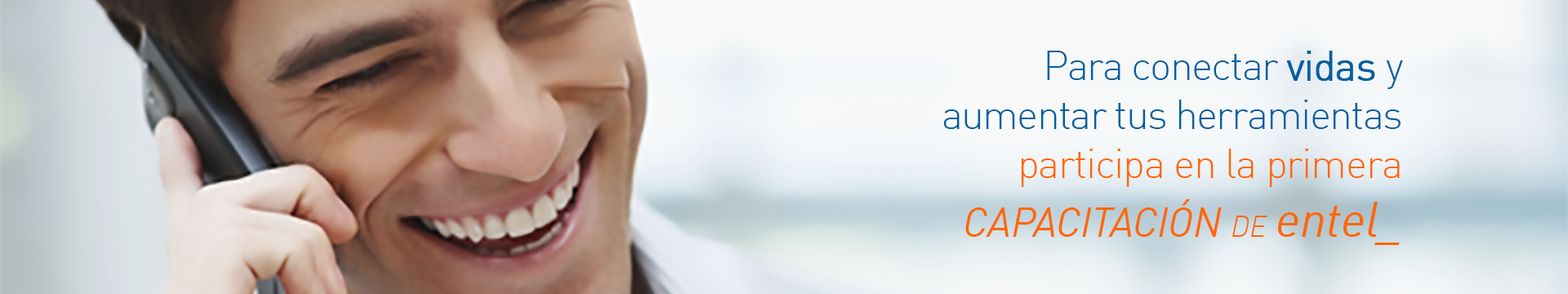
<style>
.page{position:relative;width:1568px;height:294px}
.page>*{position:absolute;margin:0}
.t1{font:40.8px "DIN-Light";letter-spacing:-0.035em;color:#005f9f}
.t2{font:40.8px "DIN-Light";letter-spacing:-0.035em;color:#005f9f;font-weight:bold}
.t3{font:40.8px "DIN-Light";letter-spacing:-0.026em;color:#ff6702}
.t4{font:40.8px "DIN-RegularItalic";letter-spacing:-0.007em;color:#ff6702}
.t5{font:29.4px "DIN-LightItalic";letter-spacing:-0.007em;color:#ff6702}
.t6{font:49px "DIN-RegularItalic";letter-spacing:-0.007em;color:#ff6702}
</style>
<div class="page">
<p class="t1" style="left:943px;top:51px;width:460px;height:194px;text-align:right">Para conectar <span class="t2">vidas </span>y <br>aumentar tus herramientas<br><span class="t3">participa en la primera <br></span><span class="t4">CAPACITACIÓN </span><span class="t5">DE </span><span class="t6">entel_</span></p>
</div>
